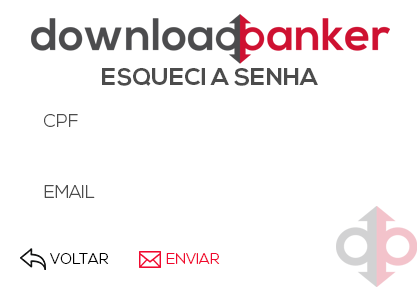
<style>
.page{position:relative;width:420px;height:290px;background:#ffffff}
.page>*{position:absolute;margin:0}
.t1{font:24px "NexaBold";color:#4c4c4c}
.t2{font:18.1px "NexaLight";color:#4c4c4c}
.t3{font:15px "NexaLight";color:#000000}
.t4{font:15px "NexaLight";color:#f0082e}
</style>
<div class="page">
<p class="t1" style="left:102px;top:68px;width:216px;height:18px">ESQUECI A SENHA</p>
<p class="t2" style="left:44px;top:114px;width:34px;height:13px">CPF</p>
<p class="t2" style="left:44px;top:185px;width:51px;height:13px">EMAIL</p>
<p class="t3" style="left:50px;top:253px;width:59px;height:11px">VOLTAR</p>
<p class="t4" style="left:166px;top:253px;width:54px;height:11px">ENVIAR</p>
</div>
